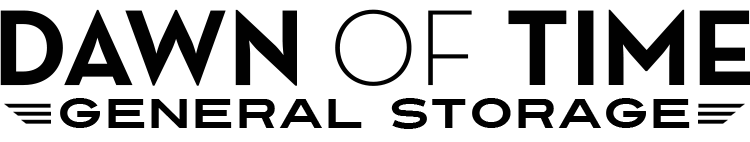
<style>
.page{position:relative;width:750px;height:142px;background:#ffffff}
.page>*{position:absolute;margin:0}
.t1{font:109.5px "NeutraText-Bold";color:#010101;text-transform:uppercase}
.t2{font:109.5px "NeutraText-Light";color:#010101;text-transform:uppercase}
.t3{font:41px "Turnpike";color:#000000;text-transform:uppercase}
</style>
<div class="page">
<p class="t1" style="left:0px;top:9px;width:751px;height:77px">Dawn <span class="t2">of </span>Time</p>
<p class="t3" style="left:60px;top:98px;width:630px;height:31px">General Storage</p>
</div>
